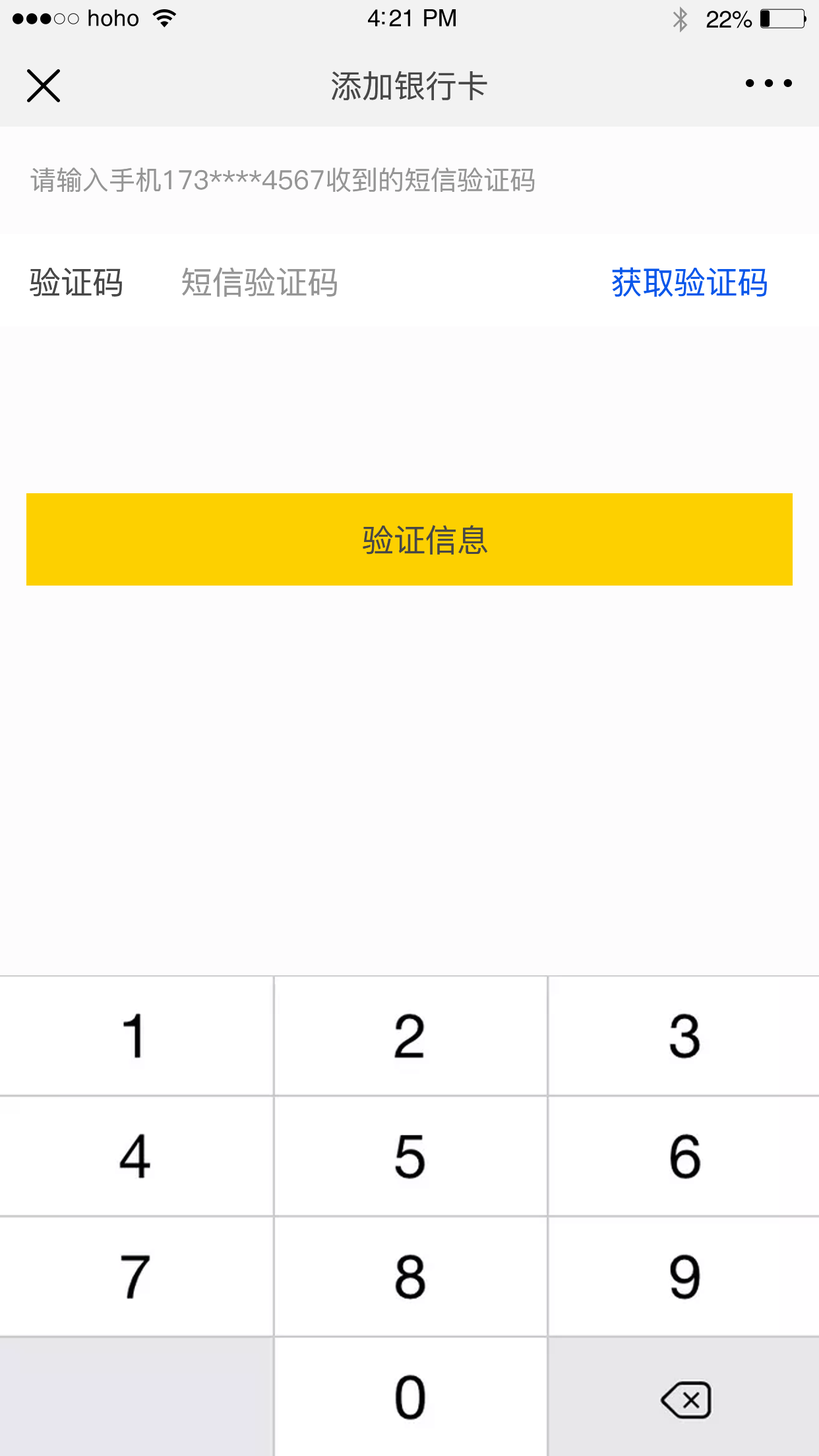
<style>
.page{position:relative;width:819px;height:1456px;background:#fdfcfd}
.page>*{position:absolute;margin:0}
.t1{font:22.8px "Helvetica";letter-spacing:0.02em;color:#000000}
.t2{font:23.8px "Helvetica";letter-spacing:-0.02em;color:#000000}
.t3{font:31.7px "PingFang-SC-Medium";color:#474747}
.t4{font:26.4px "PingFang-SC-Medium";color:#959595}
.t5{font:31.7px "PingFang-SC-Medium";color:#959595}
.t6{font:31.7px "PingFang-SC-Medium";color:#0a57ea}
</style>
<div class="page">
<p class="t1" style="left:88px;top:9px;width:50px;height:17px">hoho</p>
<p class="t2" style="left:368px;top:9px;width:88px;height:17px">4:21 PM</p>
<p class="t2" style="left:706px;top:11px;width:46px;height:17px">22%</p>
<p class="t3" style="left:332px;top:71px;width:155px;height:29px">添加银行卡</p>
<p class="t4" style="left:30px;top:167px;width:505px;height:26px">请输入手机173****4567收到的短信验证码</p>
<p class="t3" style="left:30px;top:268px;width:92px;height:29px">验证码</p>
<p class="t5" style="left:182px;top:267px;width:155px;height:30px">短信验证码</p>
<p class="t6" style="left:612px;top:267px;width:155px;height:30px">获取验证码</p>
<p class="t3" style="left:363px;top:525px;width:124px;height:30px">验证信息</p>
</div>
